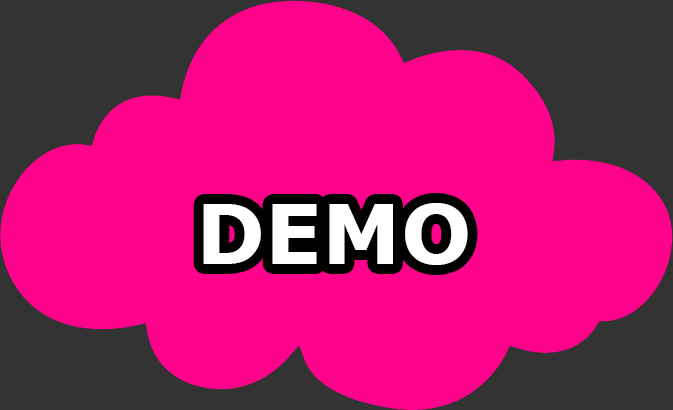
<style>
.page{position:relative;width:673px;height:410px;background:#ff028b}
.page>*{position:absolute;margin:0}
.t1{font:83.3px "Verdana-Bold";color:#ffffff}
</style>
<div class="page">
<p class="t1" style="left:203px;top:203px;width:265px;height:62px">DEMO</p>
</div>
